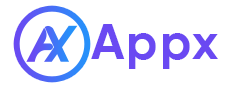
<style>
.page{position:relative;width:236px;height:87px;background:#ffffff}
.page>*{position:absolute;margin:0}
.t1{font:50px "Gilroy-Bold";letter-spacing:0.05em;color:#6a49f2}
</style>
<div class="page">
<p class="t1" style="left:91px;top:24px;width:127px;height:45px">Appx</p>
</div>
